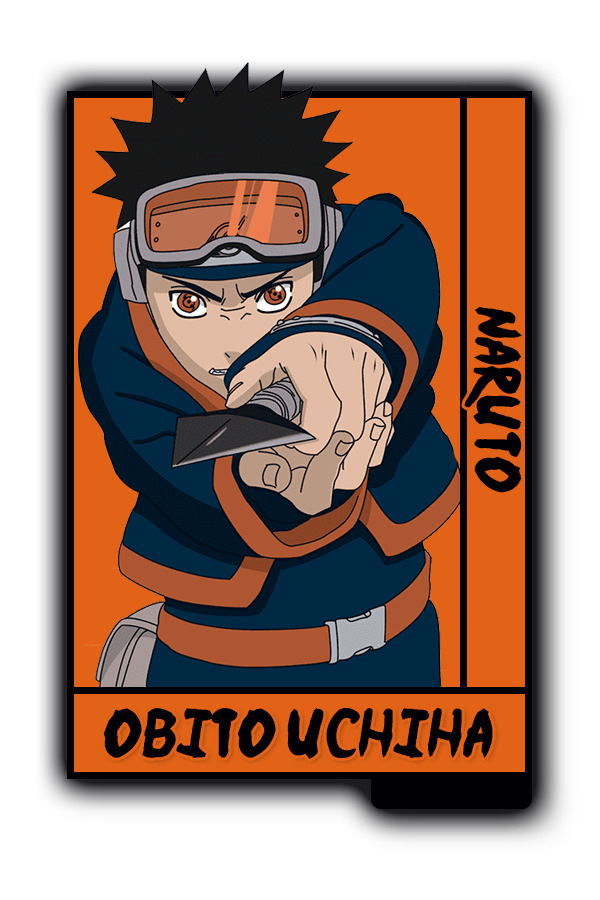
<style>
.page{position:relative;width:600px;height:900px;background:#ffffff}
.page>*{position:absolute;margin:0}
.t1{font:52px "Ninja-Naruto";color:#010005}
.t2{font:55.4px "Ninja-Naruto";color:#010005}
</style>
<div class="page">
<p class="t1" style="left:464px;top:307px;width:59px;height:186px;rotate:90deg">Naruto</p>
<p class="t2" style="left:103px;top:707px;width:390px;height:52px">Obito UCHIHA</p>
</div>
